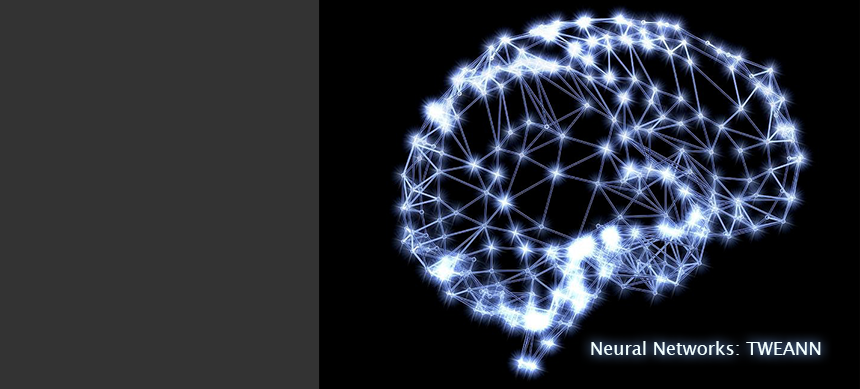
<style>
.page{position:relative;width:860px;height:389px;background:#333333}
.page>*{position:absolute;margin:0}
.t1{font:18px "LucidaSansUnicode";color:#f1ffff}
</style>
<div class="page">
<p class="t1" style="left:591px;top:341px;width:230px;height:14px">Neural Networks: TWEANN</p>
</div>
